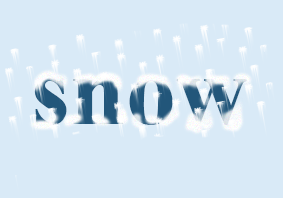
<style>
.page{position:relative;width:283px;height:198px;background:#d9eaf7}
.page>*{position:absolute;margin:0}
.t1{font:100px "TimesNewRomanPS-BoldMT"}
</style>
<div class="page">
<p class="t1" style="left:34px;top:78px;width:214px;height:47px">snow</p>
</div>
